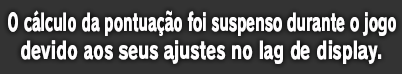
<style>
.page{position:relative;width:402px;height:74px;background:#333333}
.page>*{position:absolute;margin:0}
.t1{font:24px "RodinPro-EB";color:#fefdfe;scale:0.59 1}
.t2{font:24px "RodinPro-EB";color:#fefdfe;scale:0.67 1}
</style>
<div class="page">
<p class="t1" style="left:8px;top:10px;width:388px;height:26px">O cálculo da pontuação foi suspenso durante o jogo</p>
<p class="t2" style="left:21px;top:40px;width:361px;height:24px">devido aos seus ajustes no lag de display.</p>
</div>
